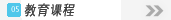
<style>
.page{position:relative;width:171px;height:20px;background:#ffffff}
.page>*{position:absolute;margin:0}
.t1{font:14px "New-Gulim";letter-spacing:0.05em;color:#3f3f3f;font-weight:bold;font-style:italic;scale:0.85 1}
</style>
<div class="page">
<p class="t1" style="left:24px;top:3px;width:51px;height:14px">教育课程</p>
</div>
